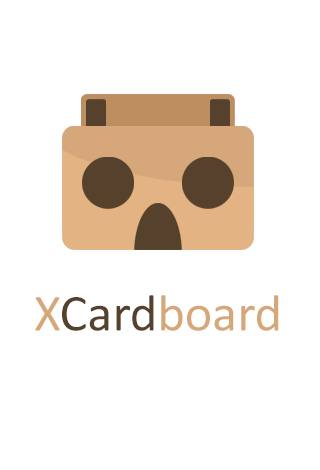
<style>
.page{position:relative;width:320px;height:470px;background:#ffffff}
.page>*{position:absolute;margin:0}
.t1{font:51.6px "Calibri";color:#d6a77a}
.t2{font:51.6px "Calibri";color:#56422c}
</style>
<div class="page">
<p class="t1" style="left:35px;top:295px;width:244px;height:36px">X<span class="t2">Card</span>board</p>
</div>
